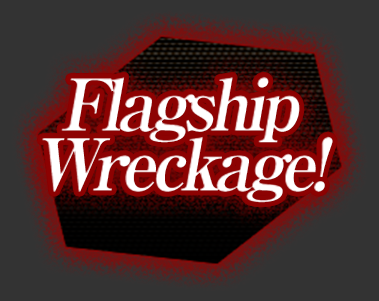
<style>
.page{position:relative;width:379px;height:301px;background:#333333}
.page>*{position:absolute;margin:0}
.t1{font:72px/60px "RyuminPro-ExBold";letter-spacing:-0.08em;color:#ffffff;font-style:italic}
</style>
<div class="page">
<p class="t1" style="left:41px;top:76px;width:292px;height:127px;text-align:center">Flagship<br>Wreckage!</p>
</div>
